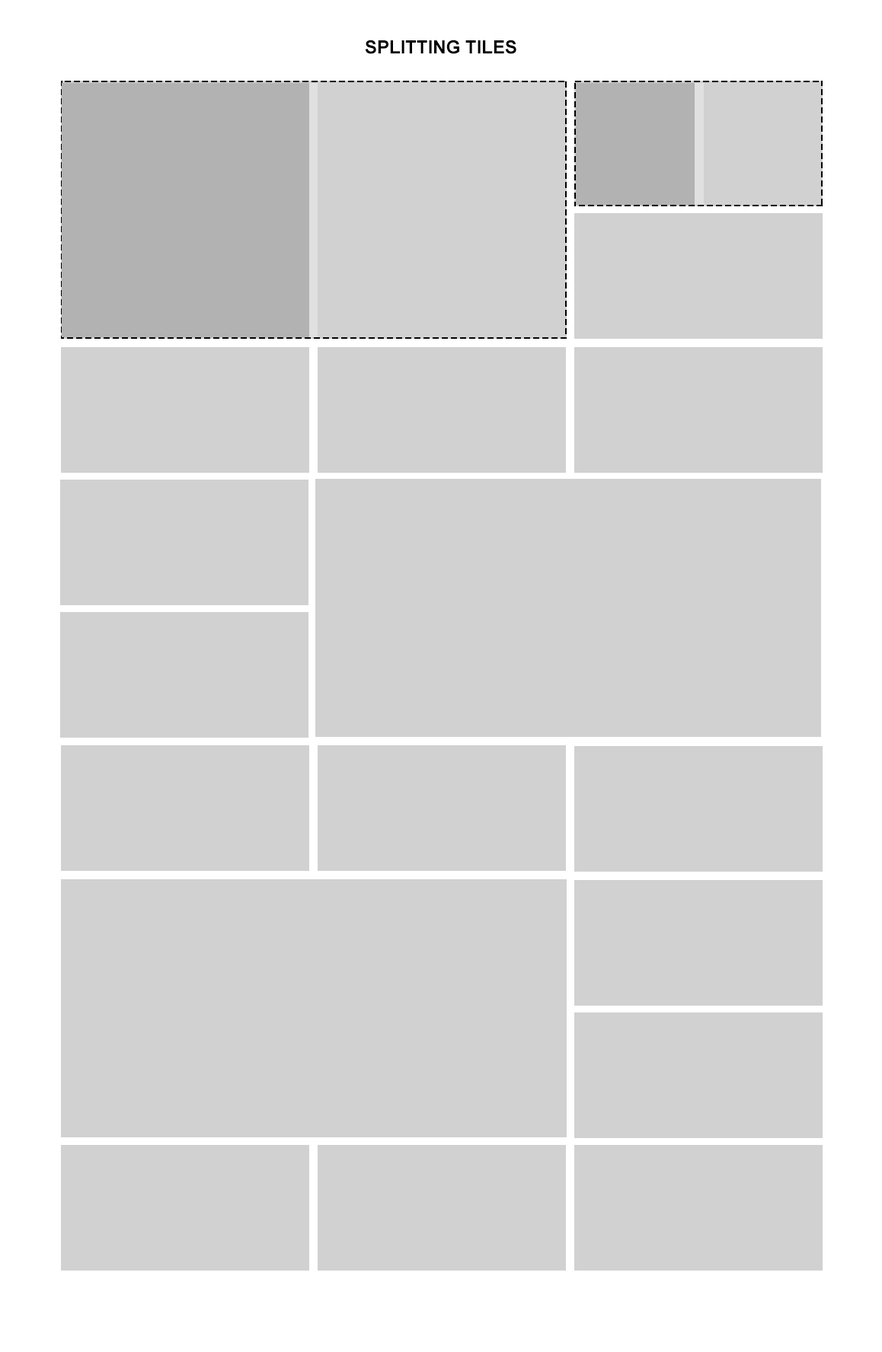
<style>
.page{position:relative;width:882px;height:1352px;background:#d1d1d1}
.page>*{position:absolute;margin:0}
.t1{font:18.3px "Arial-BoldMT";color:#000000}
</style>
<div class="page">
<p class="t1" style="left:365px;top:40px;width:151px;height:14px">SPLITTING TILES</p>
</div>
